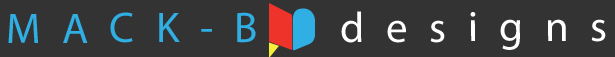
<style>
.page{position:relative;width:615px;height:57px;background:#333333}
.page>*{position:absolute;margin:0}
.t1{font:43px "MyriadPro-Regular";letter-spacing:0.5em;color:#ffffff}
.t2{font:43px "MyriadPro-Regular";letter-spacing:0.5em;color:#30afe4}
</style>
<div class="page">
<p class="t1" style="left:8px;top:11px;width:598px;height:39px"><span class="t2">MACK-B  </span>designs</p>
</div>
